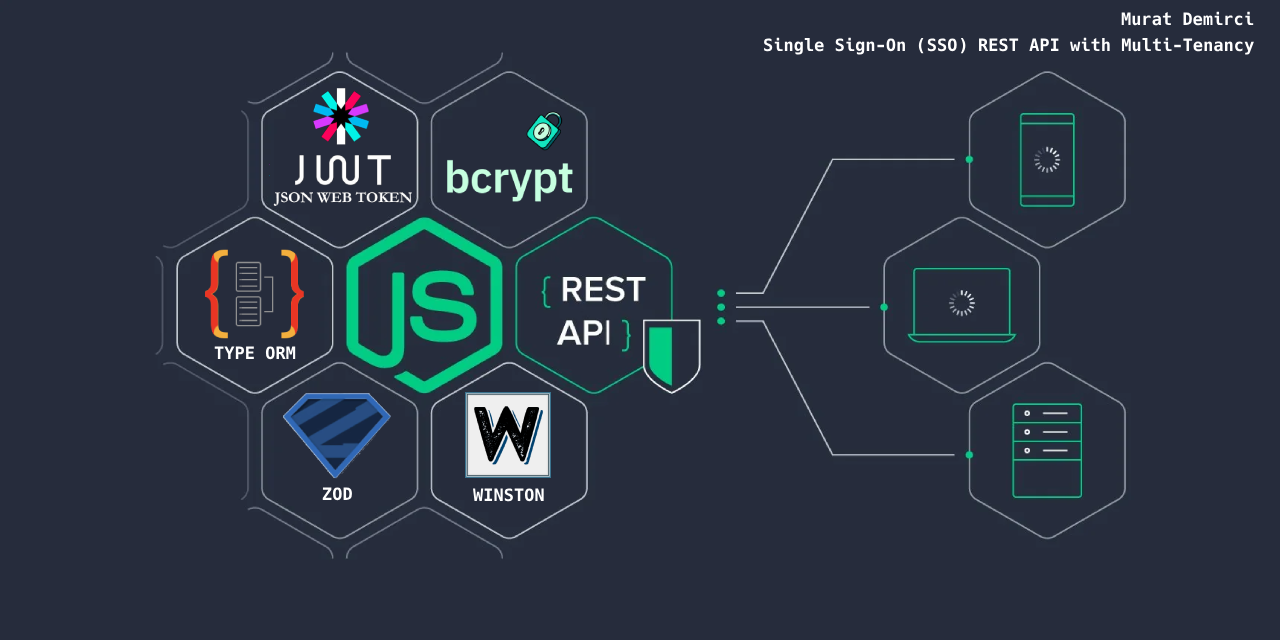
<style>
.page{position:relative;width:1280px;height:640px;background:#262c3c}
.page>*{position:absolute;margin:0}
.t1{font:17px "Hack-Bold";color:#ffffff}
</style>
<div class="page">
<p class="t1" style="left:1121px;top:11px;width:133px;height:15px">Murat Demirci</p>
<p class="t1" style="left:764px;top:37px;width:490px;height:18px">Single Sign-On (SSO) REST API with Multi-Tenancy</p>
<p class="t1" style="left:214px;top:346px;width:82px;height:14px">TYPE ORM</p>
<p class="t1" style="left:322px;top:487px;width:30px;height:14px">ZOD</p>
<p class="t1" style="left:473px;top:488px;width:71px;height:14px">WINSTON</p>
</div>
